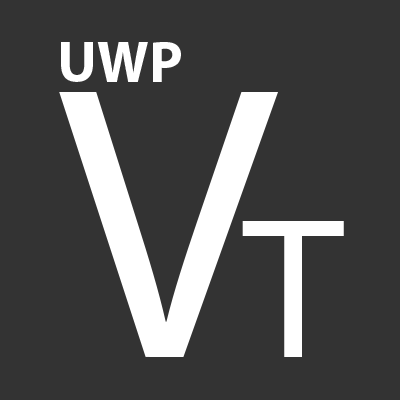
<style>
.page{position:relative;width:400px;height:400px;background:#333333}
.page>*{position:absolute;margin:0}
.t1{font:58.3px "MyriadPro-Bold";color:#ffffff}
.t2{font:94.3px "MyriadPro-Regular";color:#ffffff}
.t3{font:48.6px "MyriadPro-Regular";color:#ffffff}
</style>
<div class="page">
<p class="t1" style="left:61px;top:42px;width:120px;height:40px">UWP</p>
<p class="t2" style="left:59px;top:92px;width:219px;height:265px">V</p>
<p class="t3" style="left:242px;top:221px;width:102px;height:136px">T</p>
</div>
